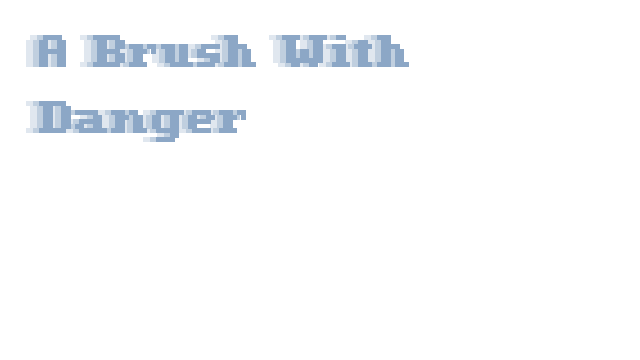
<style>
.page{position:relative;width:640px;height:360px;background:#ffffff}
.page>*{position:absolute;margin:0}
.t1{font:72px "Romulus";color:#8ca7c6}
</style>
<div class="page">
<p class="t1" style="left:39px;top:35px;width:370px;height:107px;text-align:right">A Brush With<br>Danger</p>
</div>
